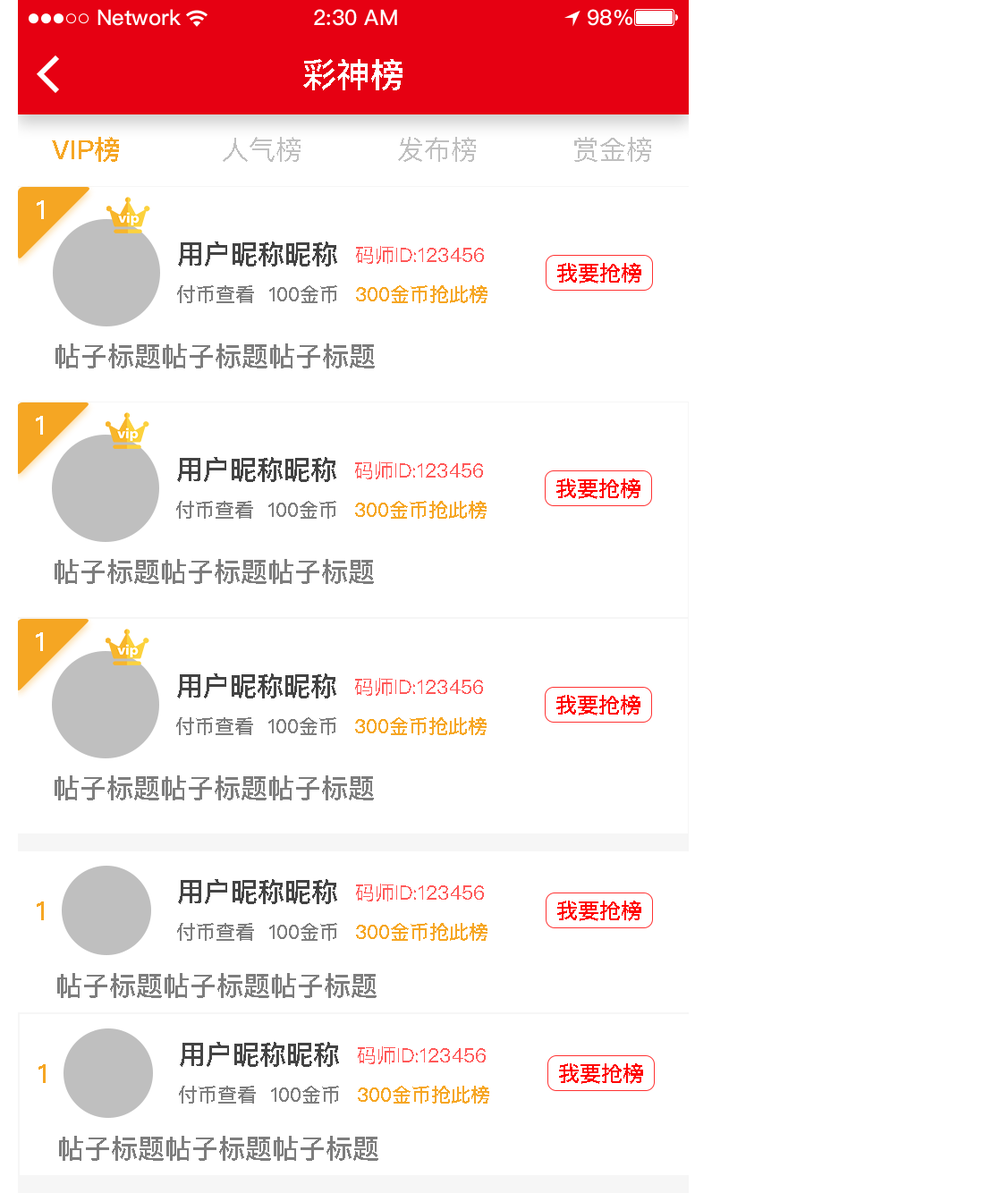
<style>
.page{position:relative;width:1000px;height:1193px;background:#ffffff}
.page>*{position:absolute;margin:0}
.t1{font:34px "PingFangSC-Medium";color:#ffffff;text-transform:uppercase}
.t2{font:26.8px "PingFangSC-Medium";color:#f6a623;text-transform:uppercase}
.t3{font:26.8px "PingFangSC-Regular";color:#bfbfbf;text-transform:uppercase}
.t4{font:26.8px "PingFangSC-Medium";color:#ffffff;text-transform:uppercase}
.t5{font:26.8px "PingFangSC-Medium";color:#434343;text-transform:uppercase}
.t6{font:19.7px "PingFangSC-Regular";color:#ff5858;text-transform:uppercase}
.t7{font:21.5px "PingFangSC-Medium";color:#ff0000;text-transform:uppercase}
.t8{font:19.7px "PingFangSC-Medium";color:#7d7d7d;text-transform:uppercase}
.t9{font:19.7px "PingFangSC-Medium";color:#f6a623;text-transform:uppercase}
.t10{font:26.8px "PingFangSC-Medium";color:#7d7d7d;text-transform:uppercase}
</style>
<div class="page">
<p class="t1" style="left:303px;top:59px;width:99px;height:31px">彩神榜</p>
<p class="t2" style="left:52px;top:137px;width:67px;height:25px">vip榜</p>
<p class="t3" style="left:223px;top:137px;width:77px;height:25px">人气榜</p>
<p class="t3" style="left:398px;top:137px;width:78px;height:25px">发布榜</p>
<p class="t3" style="left:574px;top:137px;width:77px;height:25px">赏金榜</p>
<p class="t4" style="left:37px;top:200px;width:7px;height:19px">1</p>
<p class="t5" style="left:178px;top:241px;width:159px;height:25px">用户昵称昵称</p>
<p class="t6" style="left:356px;top:246px;width:128px;height:18px">码师id:123456</p>
<p class="t7" style="left:557px;top:263px;width:84px;height:20px">我要抢榜</p>
<p class="t8" style="left:177px;top:285px;width:160px;height:18px">付币查看  100金币</p>
<p class="t9" style="left:356px;top:285px;width:131px;height:18px">300金币抢此榜</p>
<p class="t10" style="left:55px;top:343px;width:320px;height:25px">帖子标题帖子标题帖子标题</p>
<p class="t4" style="left:36px;top:416px;width:7px;height:19px">1</p>
<p class="t5" style="left:177px;top:457px;width:159px;height:25px">用户昵称昵称</p>
<p class="t6" style="left:355px;top:461px;width:128px;height:18px">码师id:123456</p>
<p class="t7" style="left:556px;top:478px;width:84px;height:21px">我要抢榜</p>
<p class="t8" style="left:176px;top:501px;width:160px;height:18px">付币查看  100金币</p>
<p class="t9" style="left:355px;top:501px;width:131px;height:18px">300金币抢此榜</p>
<p class="t10" style="left:55px;top:559px;width:319px;height:25px">帖子标题帖子标题帖子标题</p>
<p class="t4" style="left:36px;top:632px;width:7px;height:19px">1</p>
<p class="t5" style="left:177px;top:673px;width:159px;height:25px">用户昵称昵称</p>
<p class="t6" style="left:355px;top:678px;width:128px;height:18px">码师id:123456</p>
<p class="t7" style="left:556px;top:695px;width:84px;height:20px">我要抢榜</p>
<p class="t8" style="left:176px;top:717px;width:160px;height:18px">付币查看  100金币</p>
<p class="t9" style="left:355px;top:717px;width:131px;height:18px">300金币抢此榜</p>
<p class="t10" style="left:55px;top:775px;width:319px;height:25px">帖子标题帖子标题帖子标题</p>
<p class="t5" style="left:178px;top:879px;width:159px;height:25px">用户昵称昵称</p>
<p class="t6" style="left:356px;top:883px;width:128px;height:18px">码师id:123456</p>
<p class="t2" style="left:37px;top:901px;width:7px;height:19px">1</p>
<p class="t7" style="left:557px;top:900px;width:84px;height:21px">我要抢榜</p>
<p class="t8" style="left:177px;top:923px;width:160px;height:18px">付币查看  100金币</p>
<p class="t9" style="left:356px;top:923px;width:131px;height:18px">300金币抢此榜</p>
<p class="t10" style="left:57px;top:973px;width:319px;height:25px">帖子标题帖子标题帖子标题</p>
<p class="t5" style="left:180px;top:1042px;width:159px;height:25px">用户昵称昵称</p>
<p class="t6" style="left:358px;top:1046px;width:128px;height:18px">码师id:123456</p>
<p class="t2" style="left:38px;top:1064px;width:8px;height:19px">1</p>
<p class="t7" style="left:559px;top:1063px;width:84px;height:21px">我要抢榜</p>
<p class="t8" style="left:179px;top:1086px;width:160px;height:17px">付币查看  100金币</p>
<p class="t9" style="left:358px;top:1086px;width:131px;height:17px">300金币抢此榜</p>
<p class="t10" style="left:59px;top:1136px;width:319px;height:25px">帖子标题帖子标题帖子标题</p>
</div>
